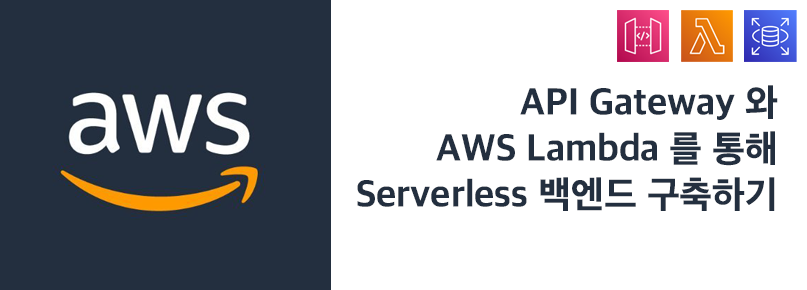
<style>
.page{position:relative;width:807px;height:290px;background:#ffffff}
.page>*{position:absolute;margin:0}
.t1{font:38px "AppleSDGothicNeoEB00";color:#232f3f}
</style>
<div class="page">
<p class="t1" style="left:357px;top:85px;width:421px;height:126px;text-align:right">API Gateway 와<br>AWS Lambda 를 통해<br>Serverless 백엔드 구축하기</p>
</div>
